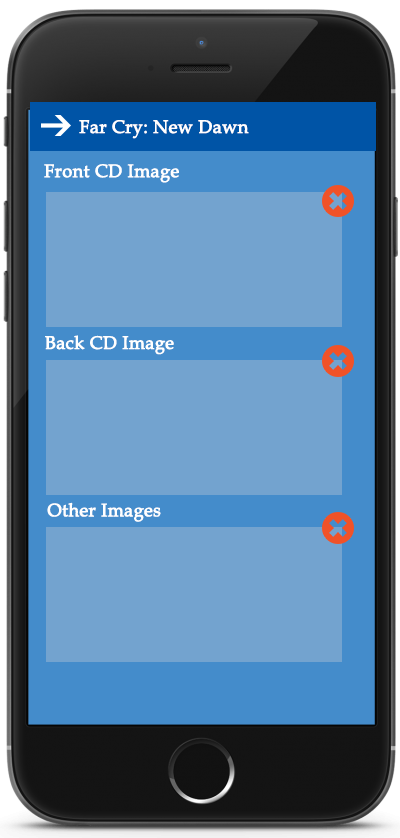
<style>
.page{position:relative;width:400px;height:838px;background:#73a3cf}
.page>*{position:absolute;margin:0}
.t1{font:18px "BookAntiqua";color:#ffffff;font-weight:bold}
</style>
<div class="page">
<p class="t1" style="left:79px;top:120px;width:170px;height:19px">Far Cry: New Dawn</p>
<p class="t1" style="left:44px;top:164px;width:135px;height:19px">Front CD Image</p>
<p class="t1" style="left:45px;top:335px;width:129px;height:20px">Back CD Image</p>
<p class="t1" style="left:47px;top:502px;width:114px;height:20px">Other Images</p>
</div>
